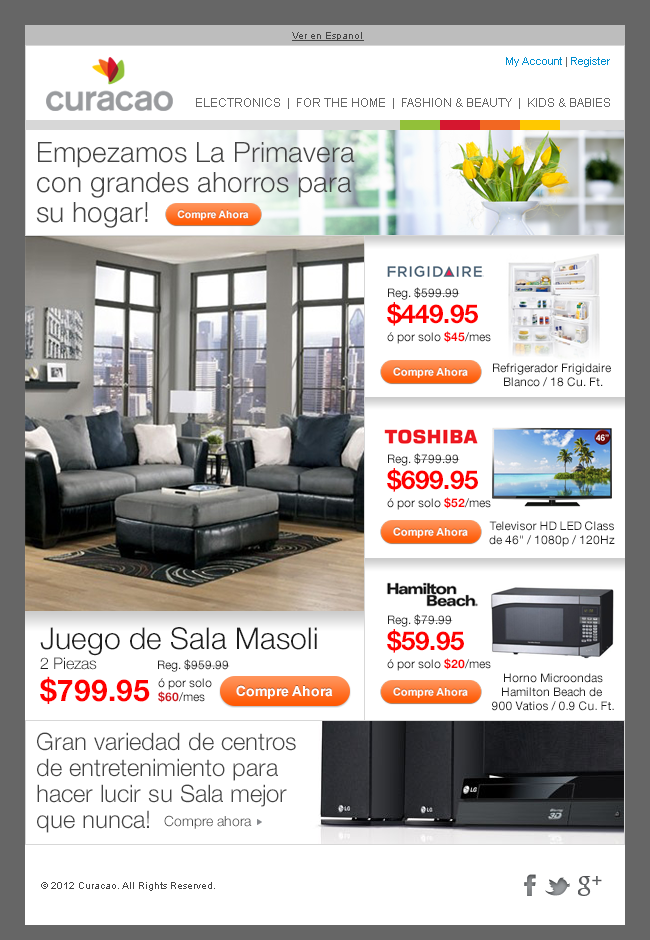
<style>
.page{position:relative;width:650px;height:940px;background:#ffffff}
.page>*{position:absolute;margin:0}
.t1{font:10px "ArialMT";color:#444444;text-decoration:underline}
.t2{font:11px "ArialMT";color:#008ecf}
.t3{font:11px "ArialMT";color:#666666}
.t4{font:12px "ArialMT";color:#666666}
.t5{font:28px/30px "HelveticaNeue-Light";color:#444444}
.t6{font:12px/18px "HelveticaNeue-Roman";color:#1e1e1e}
.t7{font:26px/26px "HelveticaNeue-Bold";color:#ff0000}
.t8{font:12px/18px "HelveticaNeue-Bold";color:#ff0000}
.t9{font:12px/14px "HelveticaNeue-Roman";color:#1e1e1e}
.t10{font:30px/18px "HelveticaNeue-Light";color:#1e1e1e}
.t11{font:16px/20px "HelveticaNeue-Light";color:#1e1e1e}
.t12{font:30px/32px "HelveticaNeue-Bold";color:#ff0000}
.t13{font:12px "HelveticaNeue-Roman";color:#1e1e1e}
.t14{font:12px/18px "HelveticaNeue-Roman";color:#ce181e}
.t15{font:12px/14px "HelveticaNeue-Bold";color:#ce181e}
.t16{font:12px/14px "HelveticaNeue-Roman";color:#ce181e}
.t17{font:24px/26px "HelveticaNeue-Light";color:#444444}
.t18{font:14px "HelveticaNeue-Light";color:#444444}
.t19{font:10px "ArialMT";color:#444444}
</style>
<div class="page">
<p class="t1" style="left:292px;top:32px;width:72px;height:9px">Ver en Espanol</p>
<p class="t2" style="left:506px;top:57px;width:104px;height:10px">My Account<span class="t3"> | </span>Register</p>
<p class="t4" style="left:196px;top:98px;width:414px;height:11px">ELECTRONICS  |  FOR THE HOME  |  FASHION &amp; BEAUTY  |  KIDS &amp; BABIES</p>
<p class="t5" style="left:36px;top:142px;width:319px;height:86px">Empezamos La Primavera con grandes ahorros para su hogar!</p>
<p class="t6" style="left:387px;top:287px;width:104px;height:57px">Reg. $599.99<br><span class="t7">$449.95<br></span>ó por solo <span class="t8">$45</span>/mes</p>
<p class="t9" style="left:493px;top:363px;width:118px;height:24px;text-align:center">Refrigerador Frigidaire <br>Blanco / 18 Cu. Ft.</p>
<p class="t6" style="left:387px;top:453px;width:104px;height:57px">Reg. $799.99<br><span class="t7">$699.95<br></span>ó por solo <span class="t8">$52</span>/mes</p>
<p class="t9" style="left:489px;top:521px;width:126px;height:26px;text-align:center">Televisor HD LED Class<br>de 46" / 1080p / 120Hz</p>
<p class="t6" style="left:387px;top:614px;width:104px;height:57px">Reg. $79.99<br><span class="t7">$59.95<br></span>ó por solo <span class="t8">$20</span>/mes</p>
<p class="t10" style="left:40px;top:627px;width:277px;height:77px">Juego de Sala Masoli<br><span class="t11">2 Piezas<br></span><span class="t12">$799.95</span></p>
<p class="t13" style="left:158px;top:659px;width:72px;height:13px">Reg. $959.99</p>
<p class="t14" style="left:158px;top:678px;width:54px;height:25px">ó por solo<br><span class="t15">$60</span><span class="t16">/mes</span></p>
<p class="t9" style="left:492px;top:673px;width:122px;height:38px;text-align:center">Horno Microondas<br>Hamilton Beach de <br>900 Vatios / 0.9 Cu. Ft.</p>
<p class="t17" style="left:37px;top:732px;width:259px;height:101px">Gran variedad de centros de entretenimiento para hacer lucir su Sala mejor que nunca!</p>
<p class="t18" style="left:164px;top:815px;width:88px;height:14px">Compre ahora</p>
<p class="t19" style="left:41px;top:882px;width:174px;height:9px">© 2012 Curacao. All Rights Reserved.</p>
</div>
